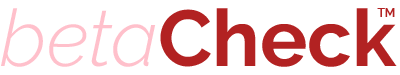
<style>
.page{position:relative;width:400px;height:75px;background:#ffffff}
.page>*{position:absolute;margin:0}
.t1{font:79px "Raleway-Bold";color:#b22222}
.t2{font:79px "Raleway-LightItalic";color:#ffc0cb}
.t3{font:12px "Raleway-SemiBold";color:#b22222}
</style>
<div class="page">
<p class="t1" style="left:1px;top:8px;width:396px;height:59px"><span class="t2">beta</span>Check</p>
<p class="t3" style="left:377px;top:8px;width:18px;height:9px">TM</p>
</div>
